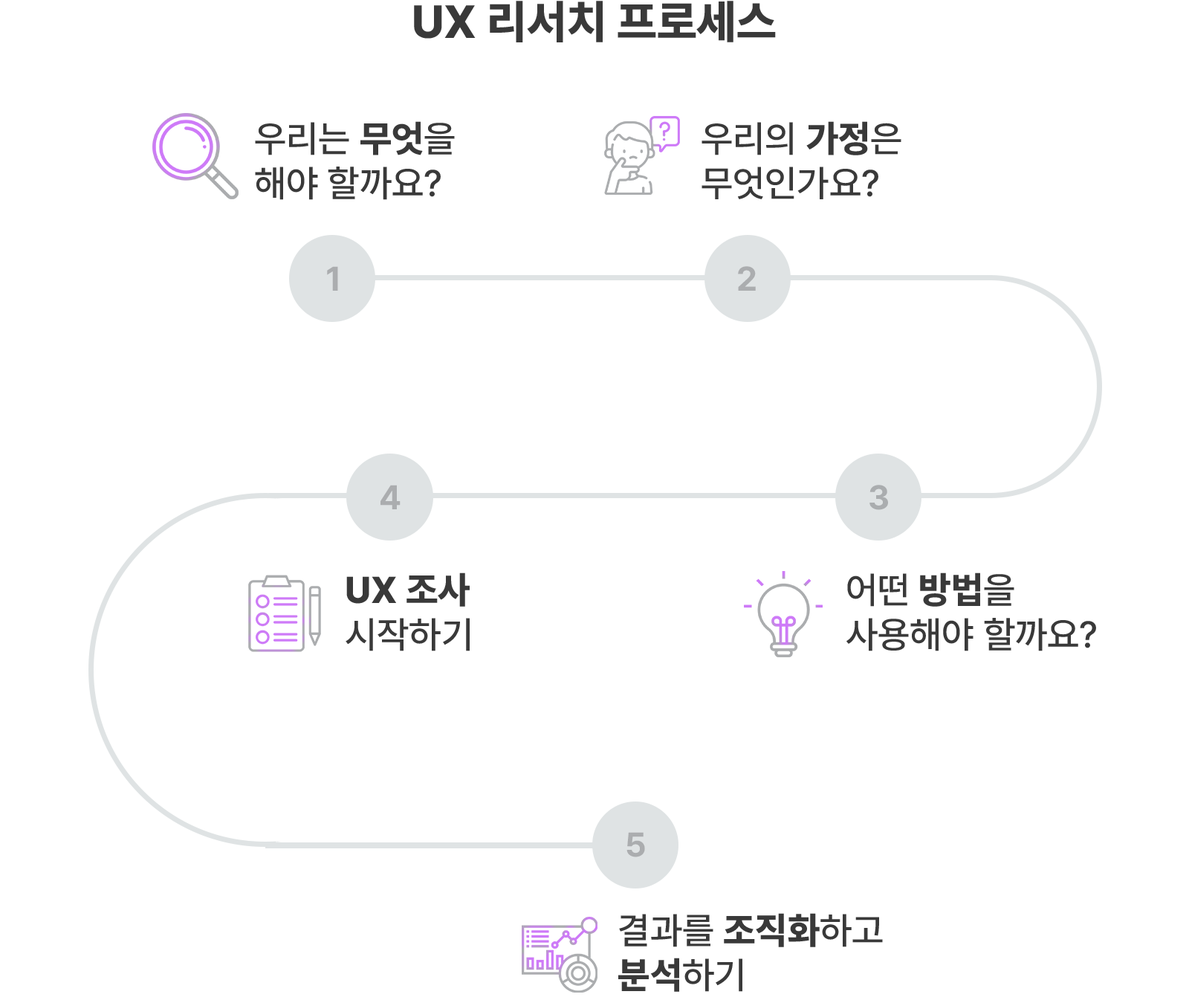
<style>
.page{position:relative;width:1189px;height:1003px;background:#ffffff}
.page>*{position:absolute;margin:0}
.t1{font:46.1px "Pretendard-ExtraBold";color:#393939;text-transform:uppercase}
.t2{font:37.2px "Pretendard-Medium";color:#393939;text-transform:uppercase}
.t3{font:37.2px "Pretendard-ExtraBold";color:#393939;text-transform:uppercase}
.t4{font:34px "Pretendard-Bold";color:#abadaf}
.t5{font:34px "Pretendard-Bold";color:#aaadaf}
</style>
<div class="page">
<p class="t1" style="left:414px;top:1px;width:362px;height:41px">UX 리서치 프로세스</p>
<p class="t2" style="left:255px;top:121px;width:200px;height:79px">우리는 <span class="t3">무엇</span>을<br>해야 할까요?</p>
<p class="t2" style="left:702px;top:121px;width:200px;height:78px">우리의 <span class="t3">가정</span>은<br>무엇인가요?</p>
<p class="t4" style="left:327px;top:266px;width:11px;height:25px">1</p>
<p class="t4" style="left:738px;top:266px;width:18px;height:25px">2</p>
<p class="t4" style="left:381px;top:485px;width:20px;height:24px">4</p>
<p class="t5" style="left:870px;top:485px;width:18px;height:25px">3</p>
<p class="t3" style="left:346px;top:572px;width:124px;height:79px">UX 조사 <br><span class="t2">시작하기</span></p>
<p class="t2" style="left:847px;top:572px;width:249px;height:79px">어떤 <span class="t3">방법</span>을<br>사용해야 할까요?</p>
<p class="t4" style="left:627px;top:832px;width:18px;height:25px">5</p>
<p class="t2" style="left:618px;top:913px;width:265px;height:79px">결과를 <span class="t3">조직화</span>하고<br><span class="t3">분석</span>하기</p>
</div>
